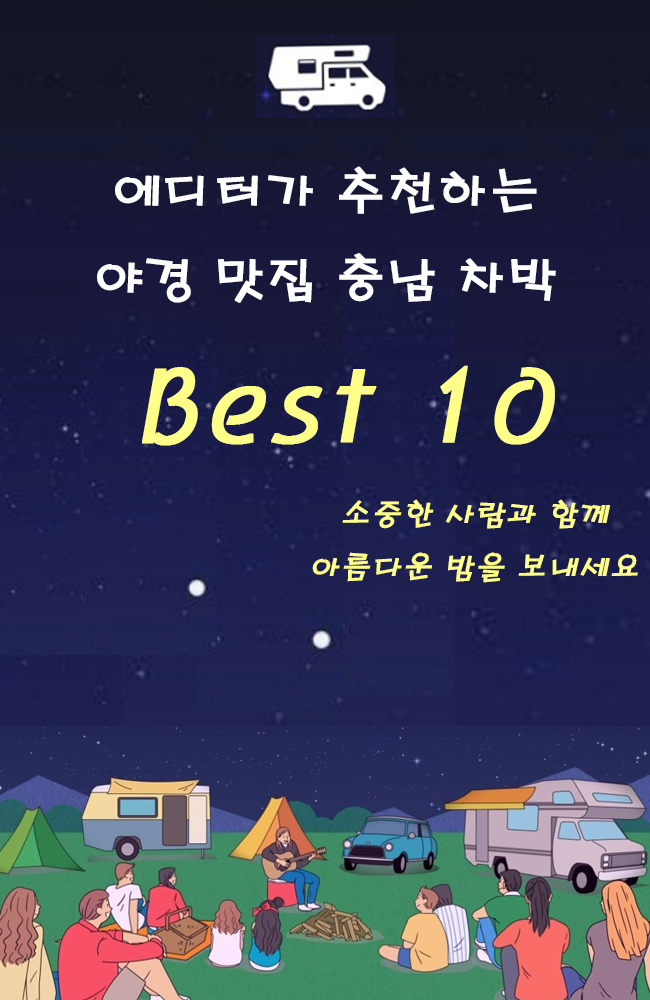
<style>
.page{position:relative;width:650px;height:1000px}
.page>*{position:absolute;margin:0}
.t1{font:50px "H2porM";color:#ffffff;font-weight:bold}
.t2{font:100px "H2porM";color:#fffe89;font-weight:bold;font-style:italic}
.t3{font:30px "H2porM";color:#fffe89;font-weight:bold;font-style:italic}
</style>
<div class="page">
<p class="t1" style="left:97px;top:166px;width:459px;height:137px;text-align:center">에디터가 추천하는 <br>야경 맛집 충남 차박 명소</p>
<p class="t2" style="left:142px;top:365px;width:413px;height:81px">Best 10</p>
<p class="t3" style="left:312px;top:499px;width:326px;height:84px;text-align:center">소중한 사람과 함께<br>아름다운 밤을 보내세요</p>
</div>
